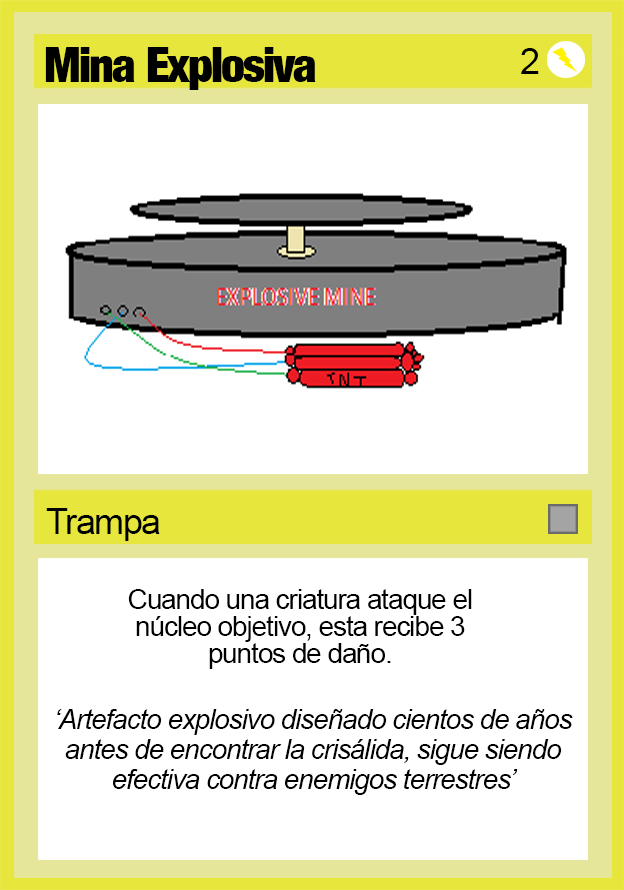
<style>
.page{position:relative;width:624px;height:890px;background:#ffffff}
.page>*{position:absolute;margin:0}
.t1{font:48px "Harvest";letter-spacing:-0.04em;color:#000000}
.t2{font:36px "ArialMT";letter-spacing:-0.04em;color:#000000}
.t3{font:28px/27px "ArialMT";letter-spacing:-0.04em;color:#000000}
.t4{font:28px/30px "Arial-ItalicMT";letter-spacing:-0.04em;color:#000000}
.t5{font:28px/54px "Arial-ItalicMT";letter-spacing:-0.04em;color:#000000}
</style>
<div class="page">
<p class="t1" style="left:45px;top:47px;width:271px;height:43px">Mina Explosiva</p>
<p class="t2" style="left:521px;top:48px;width:18px;height:26px">2</p>
<p class="t2" style="left:46px;top:508px;width:114px;height:33px">Trampa</p>
<p class="t3" style="left:128px;top:589px;width:344px;height:80px;text-align:center">Cuando una criatura ataque el núcleo objetivo, esta recibe 3 puntos de daño.</p>
<p class="t4" style="left:57px;top:709px;width:516px;height:86px;text-align:center"><span class="t5">‘</span>Artefacto explosivo diseñado cientos de años antes de encontrar la crisálida, sigue siendo efectiva contra enemigos terrestres’</p>
</div>
